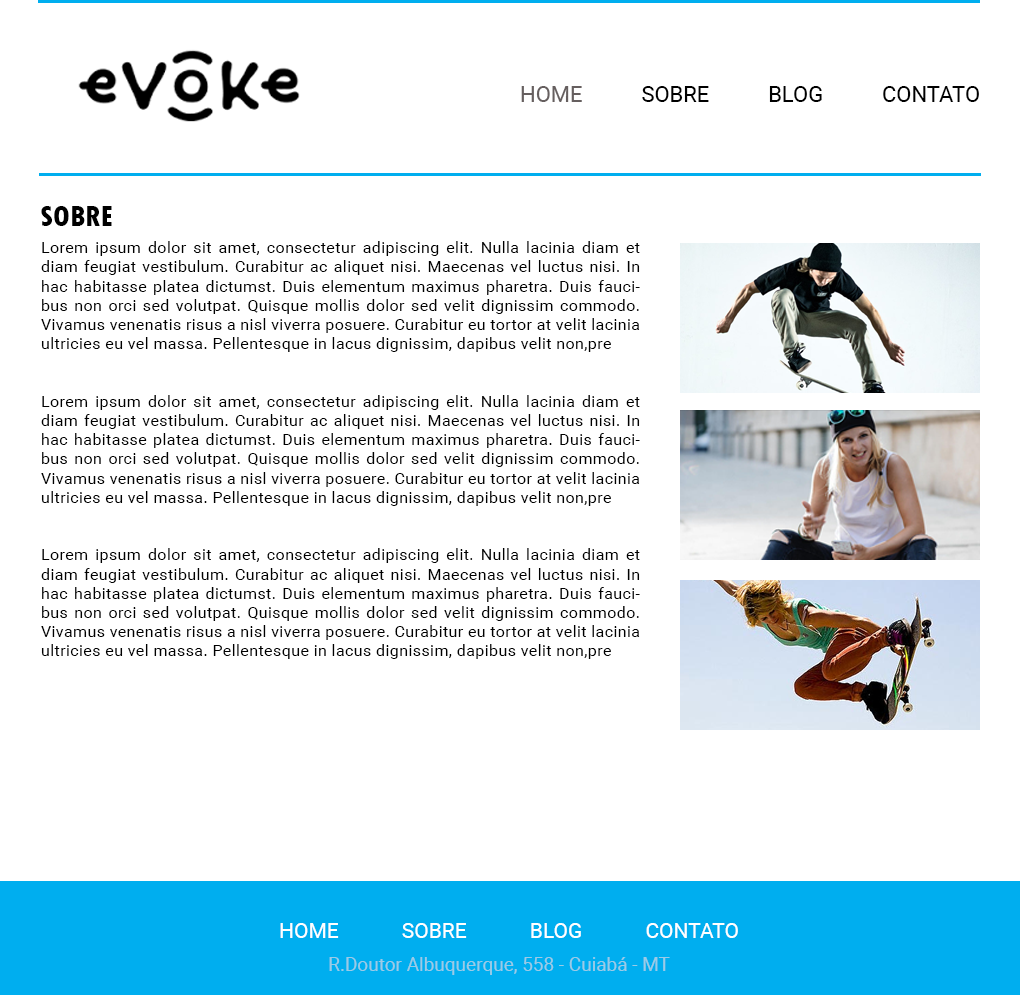
<style>
.page{position:relative;width:1020px;height:995px;background:#ffffff}
.page>*{position:absolute;margin:0}
.t1{font:22px "Roboto-Regular";color:#000000}
.t2{font:22px "Roboto-Regular";color:#665f5f}
.t3{font:30px "TwCenMT-CondensedExtraBold";color:#000000}
.t4{font:16px "Roboto-Regular";letter-spacing:0.026em;color:#000000}
.t5{font:21px "Roboto-Regular";color:#ffffff}
.t6{font:19px "Roboto-Regular";color:#9bcbe6}
</style>
<div class="page">
<p class="t1" style="left:521px;top:86px;width:458px;height:16px"><span class="t2">HOME</span> SOBRE BLOG CONTATO</p>
<p class="t3" style="left:41px;top:206px;width:71px;height:20px">SOBRE</p>
<p class="t4" style="left:41px;top:241px;width:599px;height:418px;text-align:justify">Lorem ipsum dolor sit amet, consectetur adipiscing elit. Nulla lacinia diam et diam feugiat vestibulum. Curabitur ac aliquet nisi. Maecenas vel luctus nisi. In hac habitasse platea dictumst. Duis elementum maximus pharetra. Duis faucibus non orci sed volutpat. Quisque mollis dolor sed velit dignissim commodo. Vivamus venenatis risus a nisl viverra posuere. Curabitur eu tortor at velit lacinia ultricies eu vel massa. Pellentesque in lacus dignissim, dapibus velit non,pre<br><br><br>Lorem ipsum dolor sit amet, consectetur adipiscing elit. Nulla lacinia diam et diam feugiat vestibulum. Curabitur ac aliquet nisi. Maecenas vel luctus nisi. In hac habitasse platea dictumst. Duis elementum maximus pharetra. Duis faucibus non orci sed volutpat. Quisque mollis dolor sed velit dignissim commodo. Vivamus venenatis risus a nisl viverra posuere. Curabitur eu tortor at velit lacinia ultricies eu vel massa. Pellentesque in lacus dignissim, dapibus velit non,pre<br><br><br>Lorem ipsum dolor sit amet, consectetur adipiscing elit. Nulla lacinia diam et diam feugiat vestibulum. Curabitur ac aliquet nisi. Maecenas vel luctus nisi. In hac habitasse platea dictumst. Duis elementum maximus pharetra. Duis faucibus non orci sed volutpat. Quisque mollis dolor sed velit dignissim commodo. Vivamus venenatis risus a nisl viverra posuere. Curabitur eu tortor at velit lacinia ultricies eu vel massa. Pellentesque in lacus dignissim, dapibus velit non,pre</p>
<p class="t5" style="left:280px;top:923px;width:458px;height:15px">HOME SOBRE BLOG CONTATO</p>
<p class="t6" style="left:329px;top:957px;width:341px;height:18px">R.Doutor Albuquerque, 558 - Cuiabá - MT</p>
</div>
